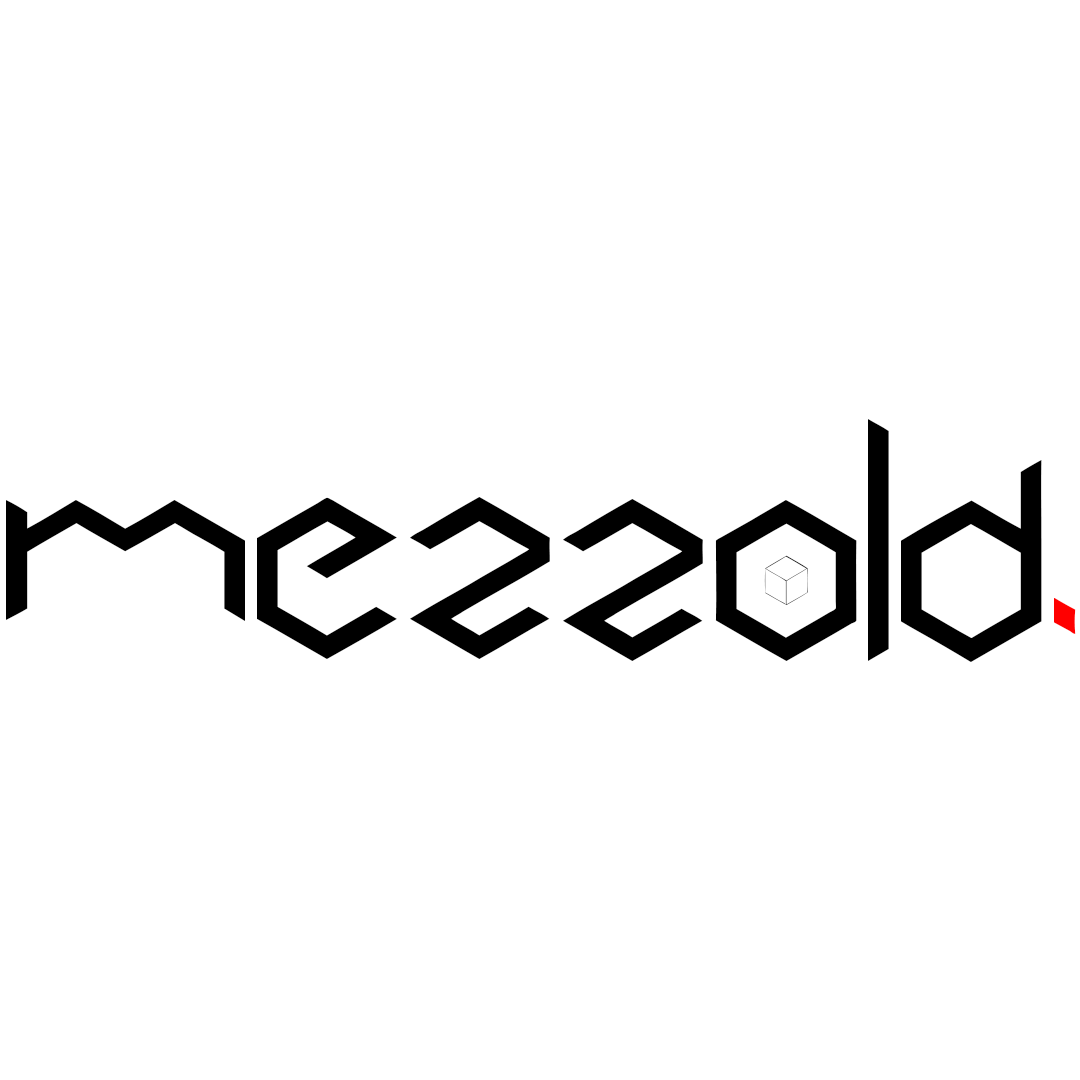
<style>
.page{position:relative;width:1080px;height:1080px;background:#ffffff}
.page>*{position:absolute;margin:0}
.t1{font:191px "Cubic";color:#000000}
.t2{font:191px "Cubic";color:#ff0000}
</style>
<div class="page">
<p class="t1" style="left:868px;top:419px;width:21px;height:242px">l</p>
<p class="t1" style="left:901px;top:460px;width:141px;height:202px">d</p>
<p class="t1" style="left:257px;top:497px;width:140px;height:162px">e</p>
<p class="t1" style="left:410px;top:497px;width:140px;height:162px">z</p>
<p class="t1" style="left:6px;top:500px;width:239px;height:121px">m</p>
<p class="t1" style="left:563px;top:499px;width:140px;height:162px">z</p>
<p class="t1" style="left:715px;top:500px;width:142px;height:161px">o</p>
<p class="t2" style="left:1054px;top:598px;width:22px;height:36px">.</p>
</div>
